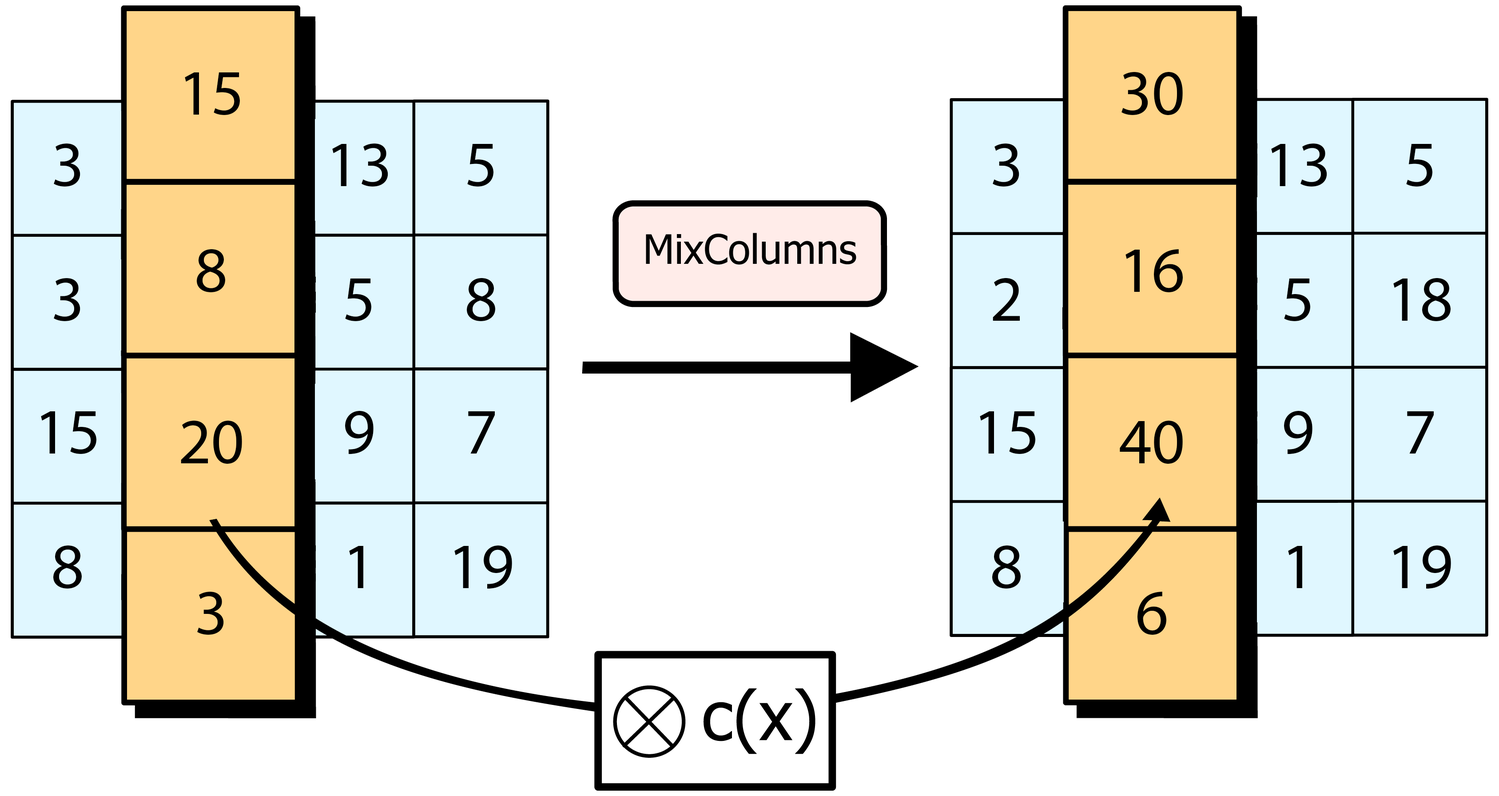
<style>
.page{position:relative;width:1499px;height:796px;background:#ffffff}
.page>*{position:absolute;margin:0}
.t1{font:64.8px "MyriadPro-Regular";color:#000000}
</style>
<div class="page">
<p class="t1" style="left:185px;top:72px;width:55px;height:43px">15</p>
<p class="t1" style="left:1121px;top:72px;width:61px;height:43px">30</p>
<p class="t1" style="left:54px;top:143px;width:26px;height:43px">3</p>
<p class="t1" style="left:332px;top:143px;width:56px;height:43px">13</p>
<p class="t1" style="left:467px;top:144px;width:26px;height:42px">5</p>
<p class="t1" style="left:992px;top:143px;width:27px;height:43px">3</p>
<p class="t1" style="left:1271px;top:143px;width:56px;height:43px">13</p>
<p class="t1" style="left:1406px;top:144px;width:26px;height:42px">5</p>
<p class="t1" style="left:197px;top:249px;width:28px;height:43px">8</p>
<p class="t1" style="left:1125px;top:249px;width:57px;height:43px">16</p>
<p class="t1" style="left:54px;top:278px;width:26px;height:43px">3</p>
<p class="t1" style="left:345px;top:278px;width:26px;height:43px">5</p>
<p class="t1" style="left:467px;top:278px;width:28px;height:43px">8</p>
<p class="t1" style="left:992px;top:278px;width:28px;height:43px">2</p>
<p class="t1" style="left:1284px;top:278px;width:26px;height:43px">5</p>
<p class="t1" style="left:1393px;top:278px;width:57px;height:43px">18</p>
<p class="t1" style="left:41px;top:411px;width:55px;height:43px">15</p>
<p class="t1" style="left:345px;top:411px;width:28px;height:43px">9</p>
<p class="t1" style="left:468px;top:411px;width:27px;height:42px">7</p>
<p class="t1" style="left:980px;top:411px;width:55px;height:43px">15</p>
<p class="t1" style="left:1284px;top:411px;width:28px;height:43px">9</p>
<p class="t1" style="left:1407px;top:411px;width:26px;height:42px">7</p>
<p class="t1" style="left:181px;top:420px;width:61px;height:44px">20</p>
<p class="t1" style="left:1119px;top:420px;width:63px;height:44px">40</p>
<p class="t1" style="left:53px;top:545px;width:29px;height:43px">8</p>
<p class="t1" style="left:349px;top:546px;width:14px;height:42px">1</p>
<p class="t1" style="left:454px;top:545px;width:58px;height:44px">19</p>
<p class="t1" style="left:992px;top:545px;width:28px;height:43px">8</p>
<p class="t1" style="left:1288px;top:546px;width:14px;height:42px">1</p>
<p class="t1" style="left:1393px;top:545px;width:58px;height:44px">19</p>
<p class="t1" style="left:197px;top:591px;width:27px;height:44px">3</p>
<p class="t1" style="left:1137px;top:591px;width:29px;height:44px">6</p>
</div>
